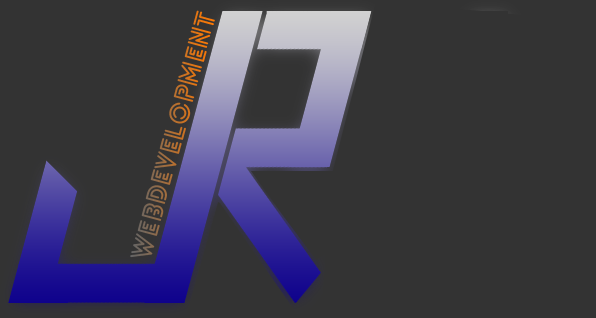
<style>
.page{position:relative;width:596px;height:318px;background:#333333}
.page>*{position:absolute;margin:0}
.t1{font:27px "LoveloLineBold"}
</style>
<div class="page">
<p class="t1" style="left:130px;top:10px;width:85px;height:248px;rotate:-75deg">webdevelopment</p>
</div>
